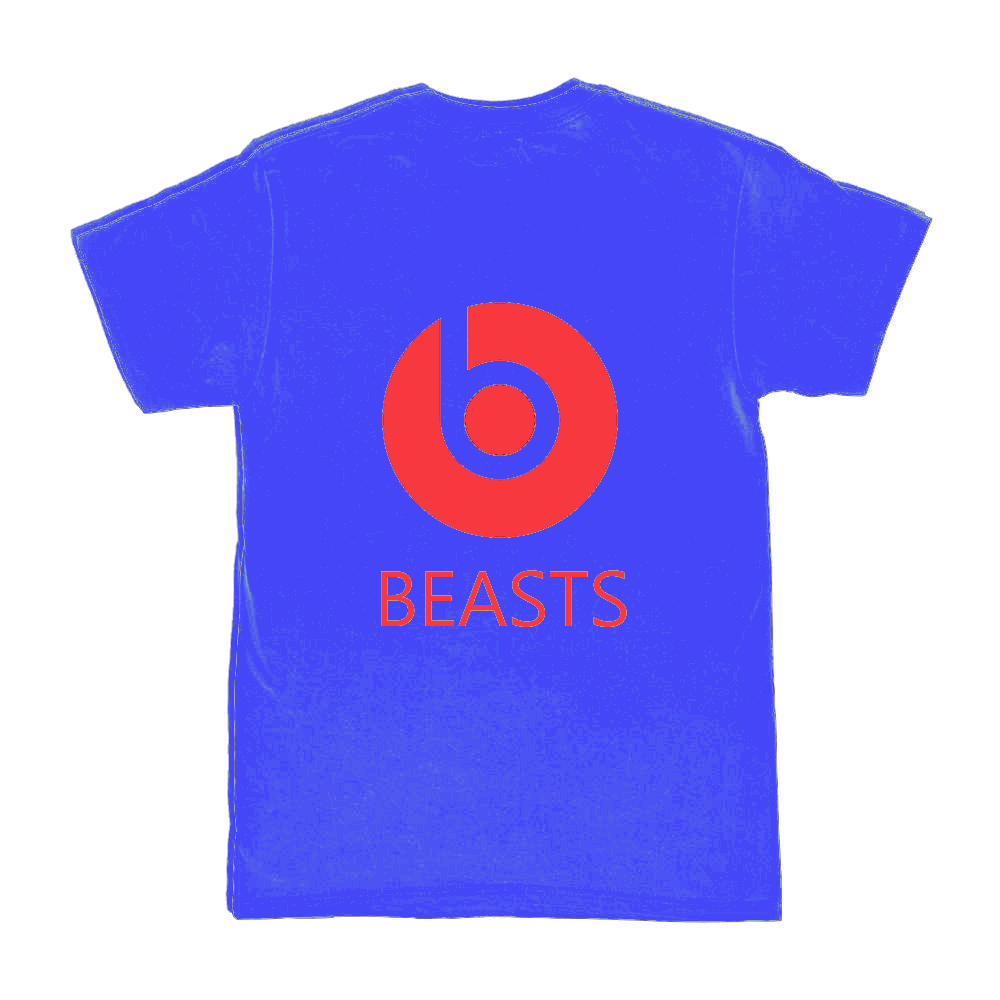
<style>
.page{position:relative;width:1000px;height:1000px;background:#ffffff}
.page>*{position:absolute;margin:0}
.t1{font:72px "MicrosoftJhengHeiRegular";color:#f7383f}
</style>
<div class="page">
<p class="t1" style="left:381px;top:570px;width:246px;height:57px">BEASTS</p>
</div>
